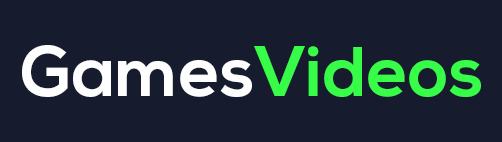
<style>
.page{position:relative;width:502px;height:142px;background:#171b2e}
.page>*{position:absolute;margin:0}
.t1{font:70.7px "NexaBold";color:#37fd49}
.t2{font:70.7px "NexaBold";color:#fefefe}
</style>
<div class="page">
<p class="t1" style="left:22px;top:45px;width:459px;height:52px"><span class="t2">Games</span>Videos</p>
</div>
